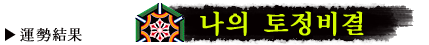
<style>
.page{position:relative;width:429px;height:45px;background:#ffffff}
.page>*{position:absolute;margin:0}
.t1{font:25px "KoreanMJ-Extra-KSCpc-EUC-H";color:#d5fc00;font-weight:bold}
.t2{font:30px "GungsuhChe";color:#ffffff;font-weight:bold}
</style>
<div class="page">
<p class="t1" style="left:200px;top:11px;width:164px;height:25px"><span class="t2"> </span>나의 토정비결</p>
</div>
